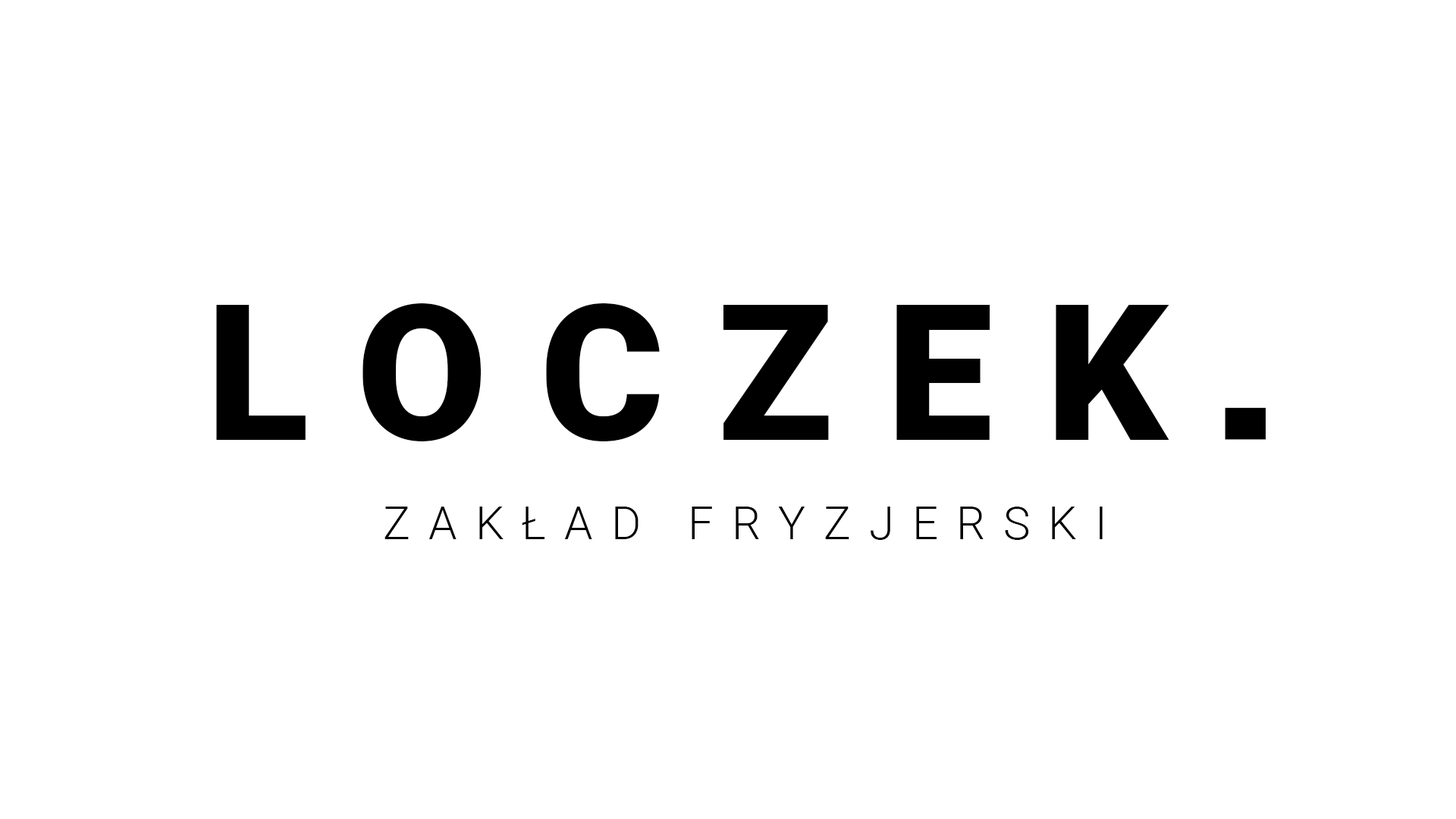
<style>
.page{position:relative;width:1456px;height:819px;background:#ffffff}
.page>*{position:absolute;margin:0}
.t1{font:189.6px "Roboto-Black";letter-spacing:0.28em;color:#000000}
.t2{font:189.6px "Phosphate-Solid";letter-spacing:0.28em;color:#000000}
.t3{font:45.5px "Roboto-Light";letter-spacing:0.4em;color:#000000}
</style>
<div class="page">
<p class="t1" style="left:216px;top:303px;width:953px;height:138px">LOCZEK</p>
<p class="t2" style="left:1225px;top:407px;width:41px;height:33px">.</p>
<p class="t3" style="left:384px;top:507px;width:719px;height:33px">ZAKŁAD FRYZJERSKI</p>
</div>
